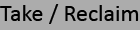
<style>
.page{position:relative;width:140px;height:30px;background:#acacac}
.page>*{position:absolute;margin:0}
.t1{font:24px "Calibri";color:#000000}
</style>
<div class="page">
<p class="t1" style="left:0px;top:4px;width:139px;height:20px">Take / Reclaim</p>
</div>
